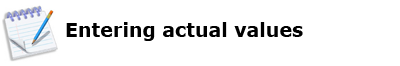
<style>
.page{position:relative;width:400px;height:66px;background:#ffffff}
.page>*{position:absolute;margin:0}
.t1{font:19px "Verdana-Bold";color:#000000}
</style>
<div class="page">
<p class="t1" style="left:66px;top:22px;width:237px;height:19px">Entering actual values</p>
</div>
